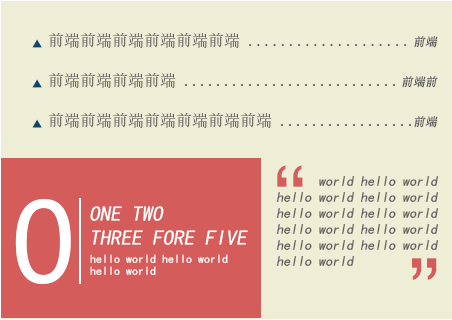
<style>
.page{position:relative;width:452px;height:320px;background:#eeedd6}
.page>*{position:absolute;margin:0}
.t1{font:16px/20px "SimSun";color:#5a5b5b}
.t2{font:12px/20px "SimSun";color:#5a5b5b;font-style:italic}
.t3{font:72px "SimHei";color:#d45d5c}
.t4{font:14px/16px "SimHei";color:#5a5b5b;font-style:italic}
.t5{font:110px "MicrosoftYaHei";color:#ffffff}
.t6{font:21px/24px "SimHei";color:#ffffff;font-style:italic}
.t7{font:12px/6px "SimHei";color:#ffffff}
</style>
<div class="page">
<p class="t1" style="left:48px;top:33px;width:363px;height:95px">前端前端前端前端前端前端 ....................<br><br>前端前端前端前端 ...........................<br><br>前端前端前端前端前端前端前端 .................</p>
<p class="t2" style="left:402px;top:36px;width:36px;height:92px;text-align:right">前端<br><br>前端前<br><br>前端</p>
<p class="t3" style="left:277px;top:165px;width:10px;height:22px">‘</p>
<p class="t3" style="left:293px;top:165px;width:10px;height:22px">‘</p>
<p class="t4" style="left:276px;top:176px;width:163px;height:90px">world hello world<br>hello world hello world<br>hello world hello world<br>hello world hello world<br>hello world hello world<br>hello world</p>
<p class="t5" style="left:15px;top:199px;width:56px;height:85px">0</p>
<p class="t6" style="left:90px;top:206px;width:158px;height:39px">ONE TWO <br>THREE FORE FIVE</p>
<p class="t7" style="left:90px;top:254px;width:138px;height:21px">hello world hello world <br><br>hello world</p>
<p class="t3" style="left:412px;top:258px;width:10px;height:22px">’</p>
<p class="t3" style="left:427px;top:258px;width:10px;height:22px">’</p>
</div>
